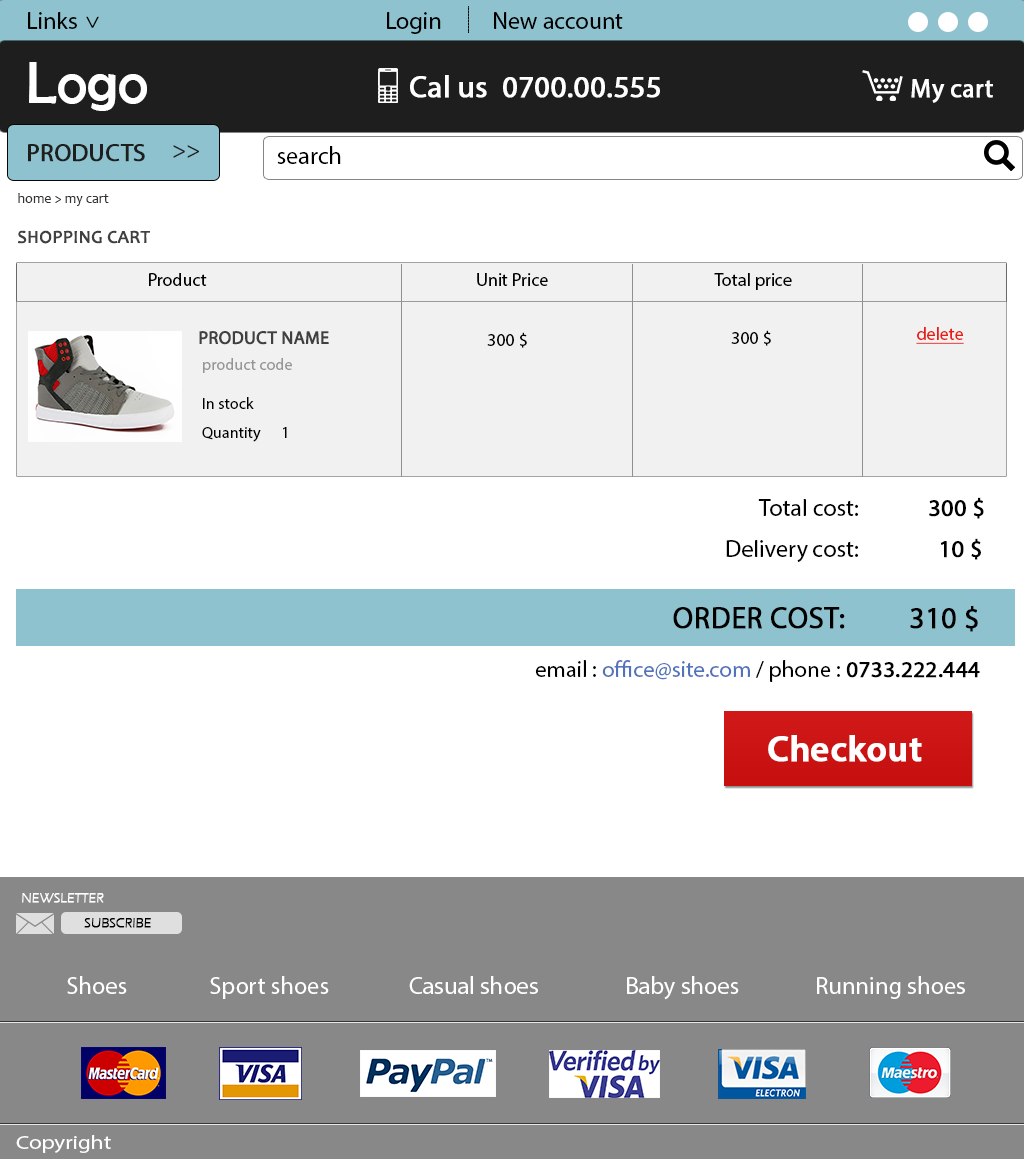
<style>
.page{position:relative;width:1024px;height:1159px;background:#ffffff}
.page>*{position:absolute;margin:0}
.t1{font:24px "MyriadPro-Regular";color:#000000}
.t2{font:23.9px "MyriadPro-Regular";color:#000000}
.t3{font:60px "BerlinSansFB-Reg";color:#ffffff}
.t4{font:30px "MyriadPro-Regular";color:#ffffff;font-weight:bold}
.t5{font:25.8px "MyriadPro-Regular";color:#ffffff;font-weight:bold}
.t6{font:24.4px "MyriadPro-Regular";color:#1e1e1e;text-transform:uppercase;font-weight:bold}
.t7{font:24px "MyriadPro-Regular";color:#1e1e1e;text-transform:uppercase}
.t8{font:24.4px "MyriadPro-Regular";color:#000000}
.t9{font:14px "Candara";color:#333333}
.t10{font:18px "Candara";color:#414040;text-transform:uppercase;font-weight:bold}
.t11{font:18px "MyriadPro-Regular";color:#000000}
.t12{font:18px "MyriadPro-Regular";color:#e81c17;text-decoration:underline}
.t13{font:18px "MyriadPro-Regular";color:#414040;text-transform:uppercase;font-weight:bold}
.t14{font:18px "MyriadPro-Regular";color:#020202}
.t15{font:16.1px "MyriadPro-Regular";color:#969696}
.t16{font:16.1px "MyriadPro-Regular";color:#020202}
.t17{font:24px "MyriadPro-Regular";color:#000000;font-weight:bold}
.t18{font:30px "MyriadPro-Regular";color:#000000;text-transform:uppercase;font-weight:bold}
.t19{font:22.9px "MyriadPro-Regular";color:#5272bc}
.t20{font:22.9px "MyriadPro-Regular";color:#000000}
.t21{font:22.9px "MyriadPro-Regular";color:#000000;font-weight:bold}
.t22{font:36px "MyriadPro-Semibold";color:#ffffff;font-weight:bold}
.t23{font:14px "ErasITC-Light";color:#ffffff;text-transform:uppercase;font-weight:bold}
.t24{font:14px "ErasITC-Light";color:#000000;text-transform:uppercase;font-weight:bold}
.t25{font:24.4px "MyriadPro-Regular";color:#ffffff}
.t26{font:19.3px "MyriadPro-Regular";color:#fffefe;scale:1.18 1}
</style>
<div class="page">
<p class="t1" style="left:28px;top:12px;width:49px;height:17px">Links</p>
<p class="t2" style="left:86px;top:16px;width:13px;height:12px;rotate:90deg">&gt;</p>
<p class="t1" style="left:387px;top:12px;width:54px;height:22px">Login</p>
<p class="t1" style="left:494px;top:12px;width:129px;height:17px">New account</p>
<p class="t3" style="left:29px;top:62px;width:118px;height:49px">Logo</p>
<p class="t4" style="left:410px;top:75px;width:250px;height:23px">Cal us  0700.00.555</p>
<p class="t5" style="left:911px;top:79px;width:82px;height:24px">My cart</p>
<p class="t6" style="left:28px;top:144px;width:117px;height:18px">Products</p>
<p class="t7" style="left:173px;top:145px;width:26px;height:13px">&gt;&gt;</p>
<p class="t8" style="left:277px;top:146px;width:64px;height:18px">search</p>
<p class="t9" style="left:18px;top:193px;width:91px;height:13px">home &gt; my cart</p>
<p class="t10" style="left:18px;top:230px;width:132px;height:14px">shopping cart</p>
<p class="t11" style="left:149px;top:273px;width:58px;height:13px">Product</p>
<p class="t11" style="left:477px;top:273px;width:71px;height:13px">Unit Price</p>
<p class="t11" style="left:714px;top:273px;width:78px;height:17px">Total price</p>
<p class="t12" style="left:916px;top:327px;width:48px;height:17px">delete</p>
<p class="t13" style="left:199px;top:331px;width:130px;height:14px">product name</p>
<p class="t14" style="left:487px;top:332px;width:40px;height:16px">300 $</p>
<p class="t14" style="left:731px;top:330px;width:40px;height:16px">300 $</p>
<p class="t15" style="left:203px;top:358px;width:89px;height:15px">product code</p>
<p class="t16" style="left:203px;top:397px;width:51px;height:12px">In stock</p>
<p class="t16" style="left:202px;top:427px;width:85px;height:15px">Quantity      1</p>
<p class="t1" style="left:758px;top:497px;width:226px;height:22px">Total cost:<span class="t17">            300 $</span></p>
<p class="t1" style="left:726px;top:538px;width:255px;height:24px">Delivery cost: <span class="t17">             10 $</span></p>
<p class="t18" style="left:673px;top:606px;width:305px;height:26px">Order cost:         310 $</p>
<p class="t19" style="left:535px;top:660px;width:445px;height:22px"><span class="t20">email : </span>office@site.com <span class="t20">/ phone : </span><span class="t21">0733.222.444</span></p>
<p class="t22" style="left:768px;top:735px;width:154px;height:27px">Checkout</p>
<p class="t23" style="left:22px;top:893px;width:82px;height:10px">Newsletter</p>
<p class="t24" style="left:84px;top:918px;width:67px;height:10px">subscribe</p>
<p class="t25" style="left:67px;top:976px;width:60px;height:18px">Shoes</p>
<p class="t25" style="left:210px;top:976px;width:119px;height:23px">Sport shoes</p>
<p class="t25" style="left:409px;top:976px;width:129px;height:18px">Casual shoes</p>
<p class="t25" style="left:627px;top:976px;width:112px;height:24px">Baby shoes</p>
<p class="t25" style="left:817px;top:976px;width:148px;height:23px">Running shoes</p>
<p class="t26" style="left:16px;top:1135px;width:95px;height:18px">Copyright</p>
</div>
